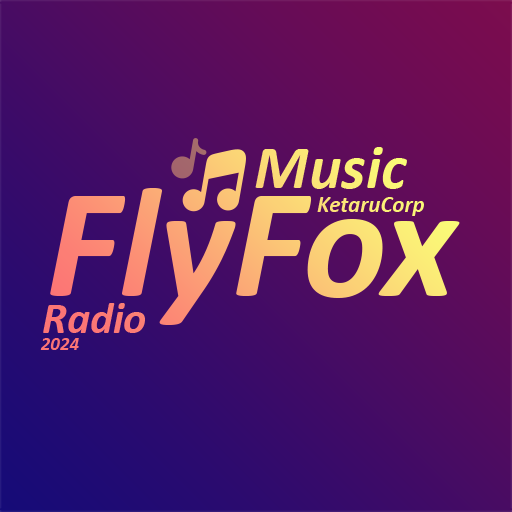
<style>
.page{position:relative;width:512px;height:512px}
.page>*{position:absolute;margin:0}
.t1{font:62px "Calibri-BoldItalic";color:#fbe977}
.t2{font:158.7px "Calibri-BoldItalic"}
.t3{font:23px "Calibri-BoldItalic";color:#fbec77}
.t4{font:43.5px "Calibri-BoldItalic";color:#fc7775}
.t5{font:19px "Calibri-BoldItalic";color:#fc7575}
</style>
<div class="page">
<p class="t1" style="left:255px;top:147px;width:152px;height:42px">Music</p>
<p class="t2" style="left:50px;top:188px;width:410px;height:137px">FlyFox</p>
<p class="t3" style="left:317px;top:197px;width:107px;height:19px">KetaruCorp</p>
<p class="t4" style="left:43px;top:303px;width:102px;height:30px">Radio</p>
<p class="t5" style="left:40px;top:338px;width:39px;height:12px">2024</p>
</div>
